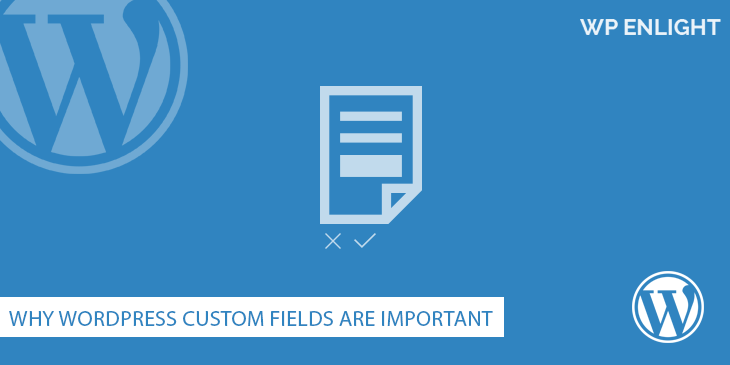
<style>
.page{position:relative;width:730px;height:365px;background:#3084c0}
.page>*{position:absolute;margin:0}
.t1{font:22.1px "MyriadPro-Regular";letter-spacing:0.01em;color:#3084c0}
</style>
<div class="page">
<p class="t1" style="left:9px;top:311px;width:484px;height:15px">WHY WORDPRESS CUSTOM FIELDS ARE IMPORTANT</p>
</div>
